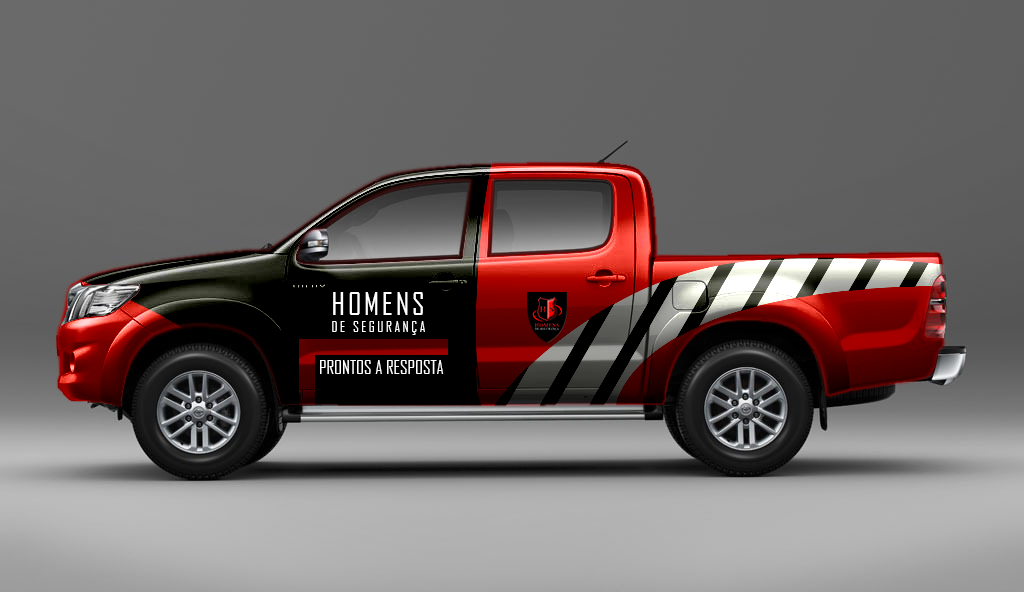
<style>
.page{position:relative;width:1024px;height:592px}
.page>*{position:absolute;margin:0}
.t1{font:14px "AgencyFB-Reg";letter-spacing:0.18em;color:#ffffff}
.t2{font:30px "AgencyFB-Reg";letter-spacing:0.1em;color:#ffffff}
.t3{font:18px "AgencyFB-Reg";color:#ffffff}
</style>
<div class="page">
<p class="t1" style="left:332px;top:292px;width:93px;height:43px"><span class="t2">HOMENS<br></span>DE SEGURANÇA</p>
<p class="t3" style="left:320px;top:360px;width:124px;height:14px">PRONTOS A RESPOSTA</p>
</div>
